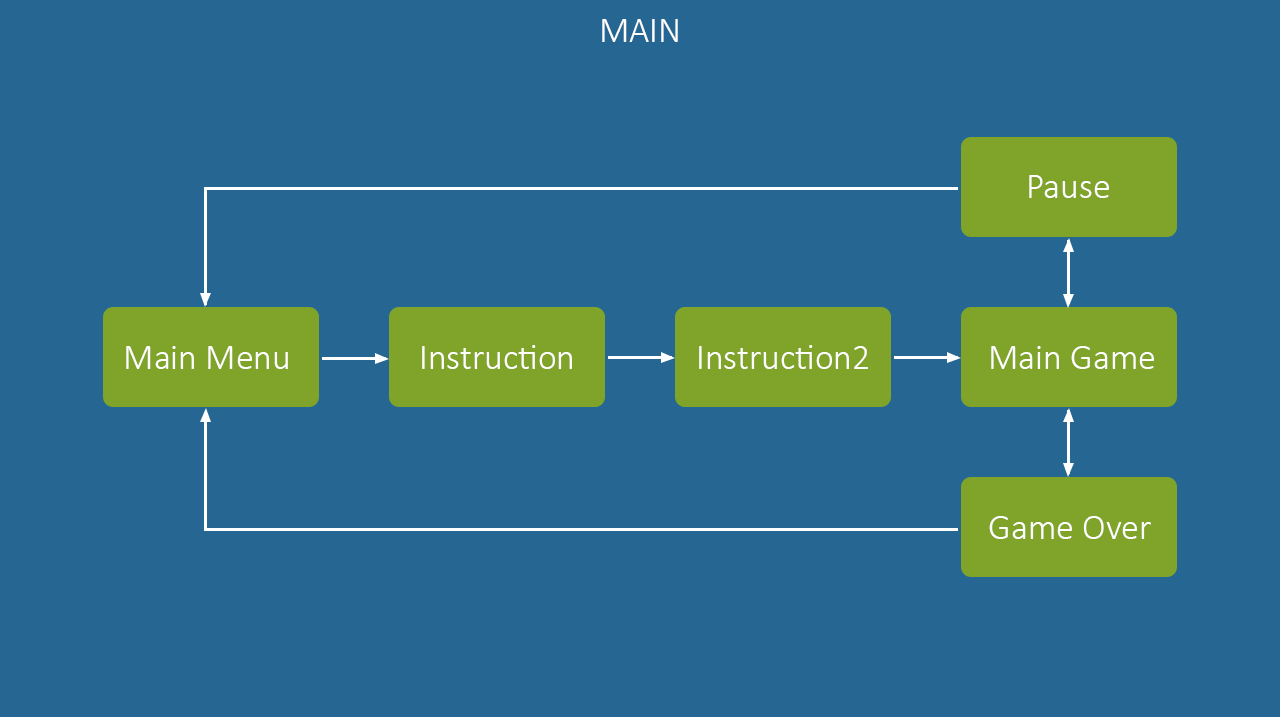
<style>
.page{position:relative;width:1280px;height:717px;background:#266693}
.page>*{position:absolute;margin:0}
.t1{font:36px "Calibri-Light";color:#ffffff}
</style>
<div class="page">
<p class="t1" style="left:602px;top:19px;width:76px;height:23px">MAIN</p>
<p class="t1" style="left:1029px;top:175px;width:80px;height:23px">Pause</p>
<p class="t1" style="left:126px;top:346px;width:162px;height:23px">Main Menu</p>
<p class="t1" style="left:422px;top:345px;width:150px;height:24px">Instruction</p>
<p class="t1" style="left:699px;top:345px;width:169px;height:24px">Instruction2</p>
<p class="t1" style="left:991px;top:346px;width:163px;height:23px">Main Game</p>
<p class="t1" style="left:989px;top:516px;width:162px;height:23px">Game Over</p>
</div>
